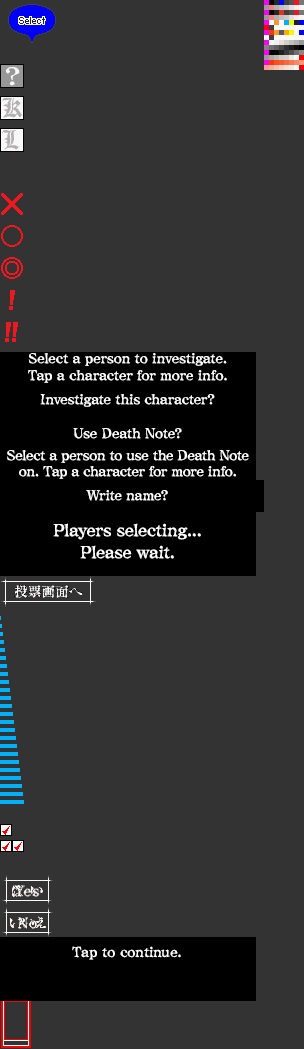
<style>
.page{position:relative;width:304px;height:1049px;background:#333333}
.page>*{position:absolute;margin:0}
.t1{font:14px/17px "ComicMysteryStd-DB";letter-spacing:-0.025em;color:#ffffff}
.t2{font:14px/24px "ComicMysteryStd-DB";letter-spacing:-0.03em;color:#ffffff}
.t3{font:14px/34px "ComicMysteryStd-DB";letter-spacing:-0.025em;color:#ffffff}
.t4{font:14px/22px "ComicMysteryStd-DB";letter-spacing:-0.04em;color:#ffffff}
.t5{font:14px/18px "ComicMysteryStd-DB";letter-spacing:-0.04em;color:#ffffff}
.t6{font:14px/16px "ComicMysteryStd-DB";letter-spacing:-0.04em;color:#ffffff}
.t7{font:17px/18px "ComicMysteryStd-DB";letter-spacing:-0.03em;color:#ffffff}
.t8{font:17px/22px "ComicMysteryStd-DB";letter-spacing:-0.03em;color:#ffffff}
.t9{font:14px "ComicMysteryStd-DB";letter-spacing:-0.025em;color:#ffffff}
</style>
<div class="page">
<p class="t1" style="left:7px;top:353px;width:242px;height:206px;text-align:center">Select a person to investigate.<br>Tap a character for more info.<br><span class="t2">Investigate this character?<br></span><span class="t3">Use Death Note?<br></span><span class="t4">Select a person to use the Death </span><span class="t5">Note</span><span class="t6"><br>on. Tap a character for more info.<br></span><span class="t2">Write name?<br><br></span><span class="t7">Players selecting...<br></span><span class="t8">Please wait.</span></p>
<p class="t9" style="left:72px;top:946px;width:109px;height:14px">Tap to continue.</p>
</div>
